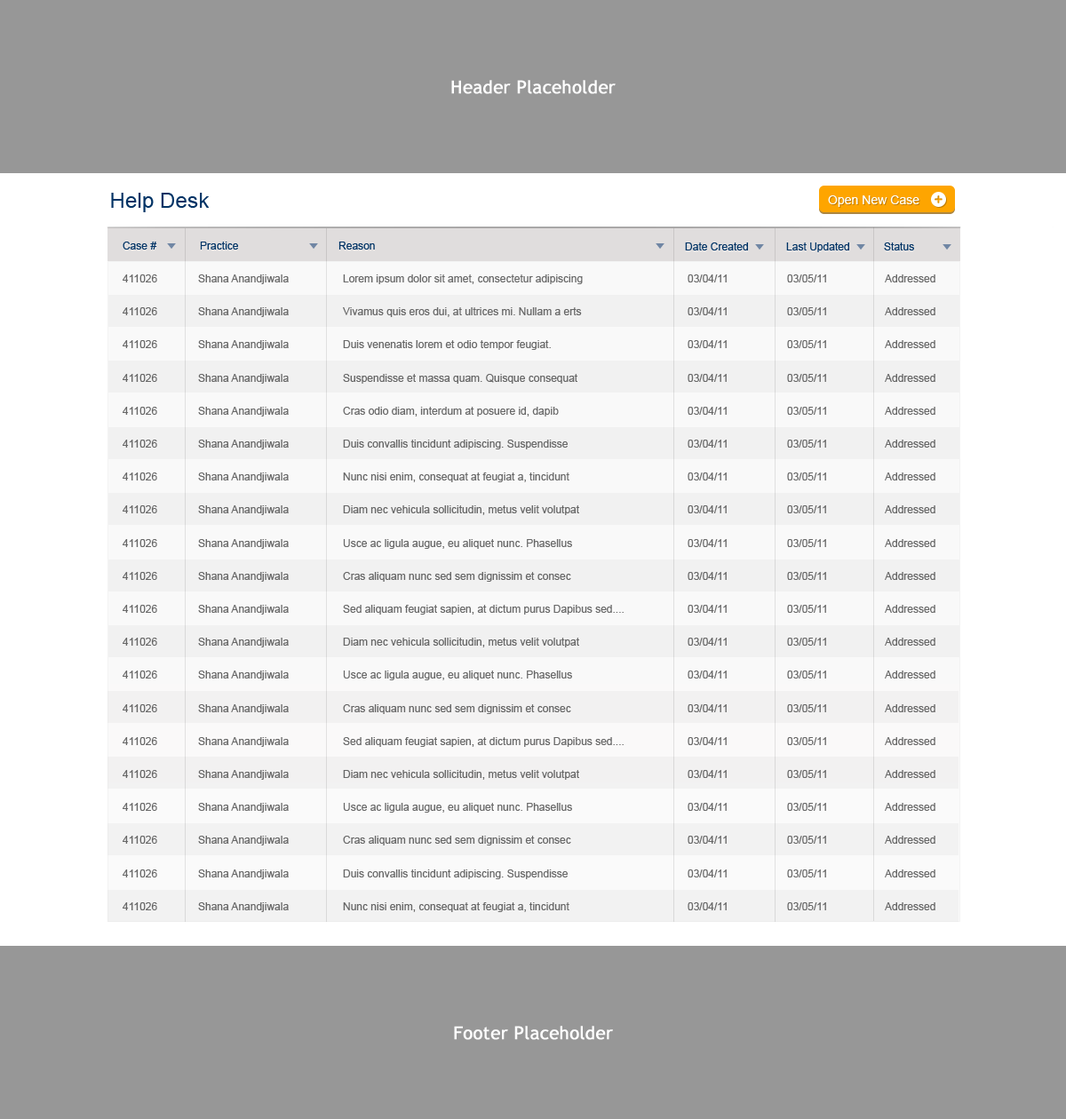
<style>
.page{position:relative;width:1066px;height:1119px;background:#979797}
.page>*{position:absolute;margin:0}
.t1{font:17.8px "TrebuchetMS";color:#ffffff;font-weight:bold}
.t2{font:21.3px "ArialMT";color:#003365}
.t3{font:12.5px "ArialMT";color:#ffffff}
.t4{font:10.7px "ArialMT";color:#003365}
.t5{font:10.7px/33px "ArialMT";color:#676767}
</style>
<div class="page">
<p class="t1" style="left:451px;top:80px;width:164px;height:14px">Header Placeholder</p>
<p class="t2" style="left:111px;top:193px;width:99px;height:19px">Help Desk</p>
<p class="t3" style="left:828px;top:195px;width:91px;height:12px">Open New Case</p>
<p class="t4" style="left:123px;top:242px;width:34px;height:8px">Case #</p>
<p class="t4" style="left:200px;top:242px;width:38px;height:8px">Practice</p>
<p class="t4" style="left:338px;top:242px;width:37px;height:8px">Reason</p>
<p class="t4" style="left:685px;top:242px;width:63px;height:8px">Date Created</p>
<p class="t4" style="left:786px;top:242px;width:63px;height:10px">Last Updated</p>
<p class="t4" style="left:884px;top:242px;width:30px;height:8px">Status</p>
<p class="t5" style="left:123px;top:274px;width:34px;height:636px">411026<br>411026 <br>411026<br>411026 <br>411026 <br>411026 <br>411026 <br>411026 <br>411026<br>411026 <br>411026 <br>411026<br>411026 <br>411026 <br>411026<br>411026 <br>411026 <br>411026<br>411026 <br>411026</p>
<p class="t5" style="left:198px;top:274px;width:91px;height:638px">Shana Anandjiwala<br>Shana Anandjiwala<br>Shana Anandjiwala<br>Shana Anandjiwala<br>Shana Anandjiwala<br>Shana Anandjiwala<br>Shana Anandjiwala<br>Shana Anandjiwala<br>Shana Anandjiwala<br>Shana Anandjiwala<br>Shana Anandjiwala<br>Shana Anandjiwala<br>Shana Anandjiwala<br>Shana Anandjiwala<br>Shana Anandjiwala<br>Shana Anandjiwala<br>Shana Anandjiwala<br>Shana Anandjiwala<br>Shana Anandjiwala<br>Shana Anandjiwala</p>
<p class="t5" style="left:343px;top:274px;width:280px;height:638px">Lorem ipsum dolor sit amet, consectetur adipiscing <br>Vivamus quis eros dui, at ultrices mi. Nullam a erts<br>Duis venenatis lorem et odio tempor feugiat.<br>Suspendisse et massa quam. Quisque consequat <br>Cras odio diam, interdum at posuere id, dapib<br>Duis convallis tincidunt adipiscing. Suspendisse<br>Nunc nisi enim, consequat at feugiat a, tincidunt <br>Diam nec vehicula sollicitudin, metus velit volutpat <br>Usce ac ligula augue, eu aliquet nunc. Phasellus <br>Cras aliquam nunc sed sem dignissim et consec<br>Sed aliquam feugiat sapien, at dictum purus Dapibus sed....<br>Diam nec vehicula sollicitudin, metus velit volutpat <br>Usce ac ligula augue, eu aliquet nunc. Phasellus <br>Cras aliquam nunc sed sem dignissim et consec<br>Sed aliquam feugiat sapien, at dictum purus Dapibus sed....<br>Diam nec vehicula sollicitudin, metus velit volutpat <br>Usce ac ligula augue, eu aliquet nunc. Phasellus <br>Cras aliquam nunc sed sem dignissim et consec<br>Duis convallis tincidunt adipiscing. Suspendisse<br>Nunc nisi enim, consequat at feugiat a, tincidunt</p>
<p class="t5" style="left:687px;top:274px;width:39px;height:636px">03/04/11<br>03/04/11<br>03/04/11<br>03/04/11<br>03/04/11<br>03/04/11<br>03/04/11<br>03/04/11<br>03/04/11<br>03/04/11<br>03/04/11<br>03/04/11<br>03/04/11<br>03/04/11<br>03/04/11<br>03/04/11<br>03/04/11<br>03/04/11<br>03/04/11<br>03/04/11</p>
<p class="t5" style="left:787px;top:274px;width:39px;height:636px">03/05/11<br>03/05/11<br>03/05/11<br>03/05/11<br>03/05/11<br>03/05/11<br>03/05/11<br>03/05/11<br>03/05/11<br>03/05/11<br>03/05/11<br>03/05/11<br>03/05/11<br>03/05/11<br>03/05/11<br>03/05/11<br>03/05/11<br>03/05/11<br>03/05/11<br>03/05/11</p>
<p class="t5" style="left:885px;top:274px;width:50px;height:636px">Addressed<br>Addressed<br>Addressed<br>Addressed<br>Addressed<br>Addressed<br>Addressed<br>Addressed<br>Addressed<br>Addressed<br>Addressed<br>Addressed<br>Addressed<br>Addressed<br>Addressed<br>Addressed<br>Addressed<br>Addressed<br>Addressed<br>Addressed</p>
<p class="t1" style="left:454px;top:1026px;width:159px;height:14px">Footer Placeholder</p>
</div>
